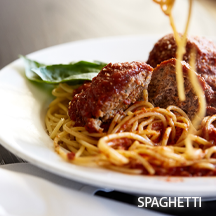
<style>
.page{position:relative;width:216px;height:216px}
.page>*{position:absolute;margin:0}
.t1{font:14px "MyriadPro-Regular";color:#f8f7f7}
</style>
<div class="page">
<p class="t1" style="left:137px;top:197px;width:64px;height:10px">SPAGHETTI</p>
</div>
